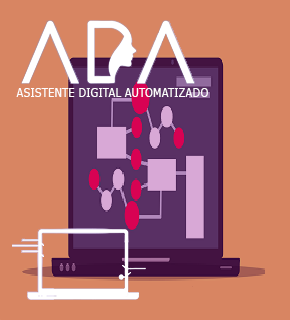
<style>
.page{position:relative;width:290px;height:320px;background:#d88562}
.page>*{position:absolute;margin:0}
.t1{font:12px "Verdana";color:#fefefe;scale:0.85 1}
</style>
<div class="page">
<p class="t1" style="left:16px;top:88px;width:192px;height:9px">ASISTENTE DIGITAL AUTOMATIZADO</p>
</div>
